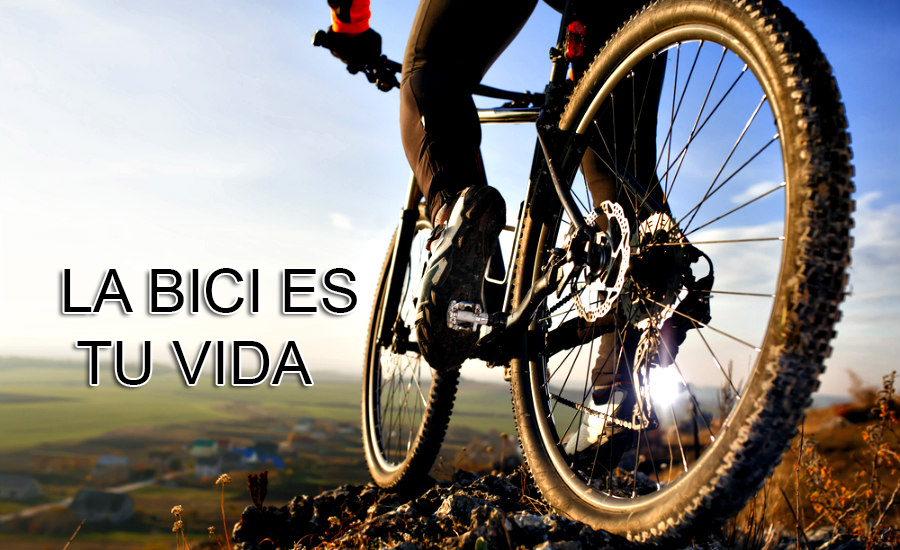
<style>
.page{position:relative;width:900px;height:550px}
.page>*{position:absolute;margin:0}
.t1{font:60px "ArialMT";color:#000000}
</style>
<div class="page">
<p class="t1" style="left:64px;top:268px;width:293px;height:117px">LA BICI ES<br> TU VIDA</p>
</div>
